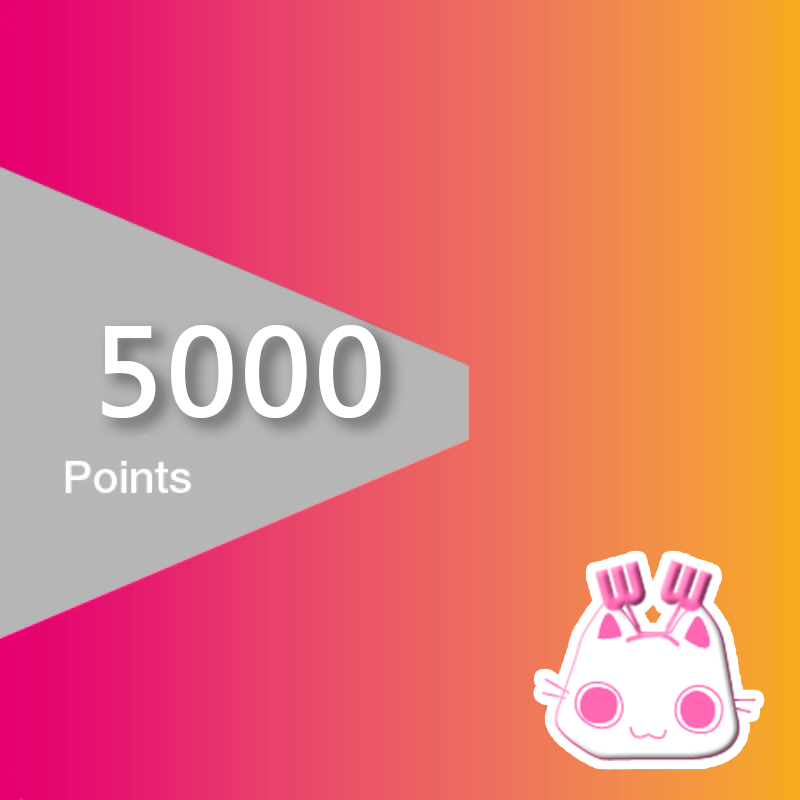
<style>
.page{position:relative;width:800px;height:800px}
.page>*{position:absolute;margin:0}
.t1{font:120px "MicrosoftJhengHeiBold";letter-spacing:0.02em;color:#ffffff}
</style>
<div class="page">
<p class="t1" style="left:102px;top:325px;width:279px;height:93px">5000</p>
</div>
